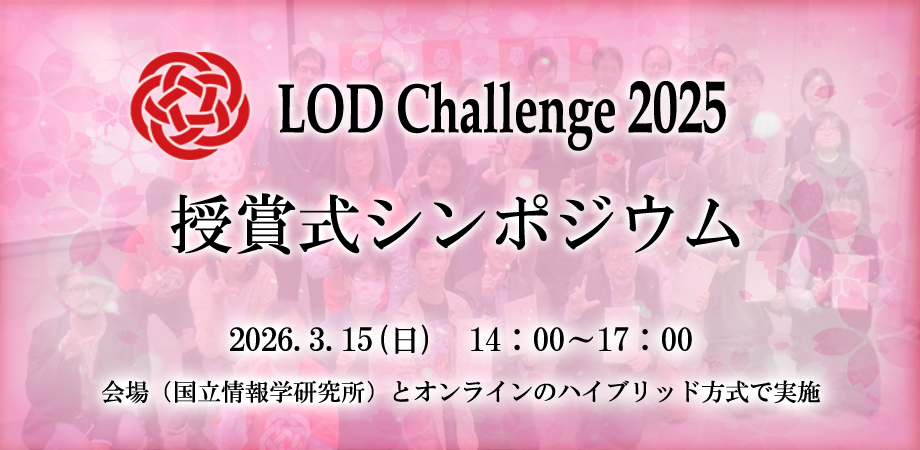
<style>
.page{position:relative;width:920px;height:450px}
.page>*{position:absolute;margin:0}
.t1{font:69.8px "BookAntiqua-Bold";color:#000000;scale:0.68 1}
.t2{font:73.9px "BookAntiqua-Bold";color:#000000;scale:0.68 1}
.t3{font:64px "HGMinchoB";color:#000000}
.t4{font:24px "HGMinchoB";color:#000000}
.t5{font:32px "HGMinchoB";color:#000000}
</style>
<div class="page">
<p class="t1" style="left:278px;top:81px;width:448px;height:70px">LOD Challenge <span class="t2">2025</span></p>
<p class="t3" style="left:170px;top:193px;width:570px;height:62px">授賞式シンポジウム</p>
<p class="t4" style="left:102px;top:324px;width:719px;height:80px;text-align:center"><span class="t5">2026.3.15(日)　14：00～17：00<br></span>会場（国立情報学研究所）とオンラインのハイブリッド方式で実施</p>
</div>
